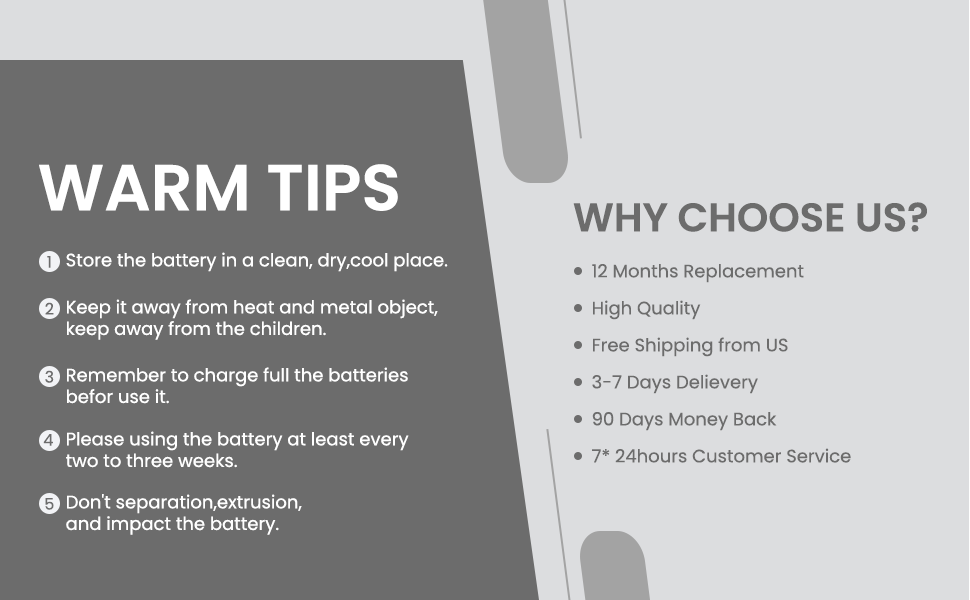
<style>
.page{position:relative;width:970px;height:600px;background:#dcdddf}
.page>*{position:absolute;margin:0}
.t1{font:65px "Poppins-SemiBold";color:#ffffff;text-transform:uppercase}
.t2{font:40px "Poppins-SemiBold";color:#6c6c6c;text-transform:uppercase}
.t3{font:16px "Poppins-Regular";color:#6c6c6c}
.t4{font:18px "Poppins-Regular";color:#ffffff}
.t5{font:18px "Poppins-Regular";color:#6c6c6c}
</style>
<div class="page">
<p class="t1" style="left:39px;top:164px;width:359px;height:47px">WARM TIPS</p>
<p class="t2" style="left:573px;top:202px;width:354px;height:30px">Why Choose us?</p>
<p class="t3" style="left:47px;top:256px;width:4px;height:12px">1</p>
<p class="t4" style="left:66px;top:252px;width:382px;height:20px">Store the battery in a clean, dry,cool place.</p>
<p class="t5" style="left:592px;top:264px;width:212px;height:19px">12 Months Replacement</p>
<p class="t3" style="left:45px;top:302px;width:9px;height:13px">2</p>
<p class="t4" style="left:67px;top:299px;width:371px;height:41px">Keep it away from heat and metal object,<br>keep away from the children.</p>
<p class="t5" style="left:593px;top:300px;width:108px;height:20px">High Quality</p>
<p class="t5" style="left:593px;top:337px;width:195px;height:20px">Free Shipping from US</p>
<p class="t3" style="left:45px;top:370px;width:9px;height:13px">3</p>
<p class="t4" style="left:67px;top:367px;width:341px;height:37px">Remember to charge full the batteries<br>befor use it.</p>
<p class="t5" style="left:592px;top:374px;width:166px;height:20px">3-7 Days Delievery</p>
<p class="t5" style="left:592px;top:412px;width:185px;height:19px">90 Days Money Back</p>
<p class="t3" style="left:43px;top:434px;width:10px;height:12px">4</p>
<p class="t4" style="left:66px;top:431px;width:343px;height:37px">Please using the battery at least every<br>two to three weeks.</p>
<p class="t5" style="left:592px;top:448px;width:259px;height:15px">7* 24hours Customer Service</p>
<p class="t4" style="left:66px;top:494px;width:236px;height:41px">Don't separation,extrusion,<br>and impact the battery.</p>
<p class="t3" style="left:45px;top:498px;width:9px;height:12px">5</p>
</div>
